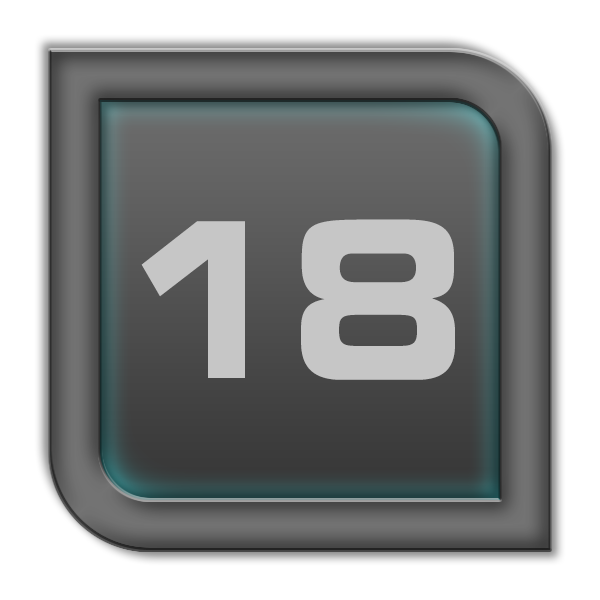
<style>
.page{position:relative;width:600px;height:600px;background:#ffffff}
.page>*{position:absolute;margin:0}
.t1{font:216px "EurostileLTStd-BoldEx2";color:#c6c6c6;scale:0.83 1}
</style>
<div class="page">
<p class="t1" style="left:141px;top:219px;width:314px;height:161px">18</p>
</div>
